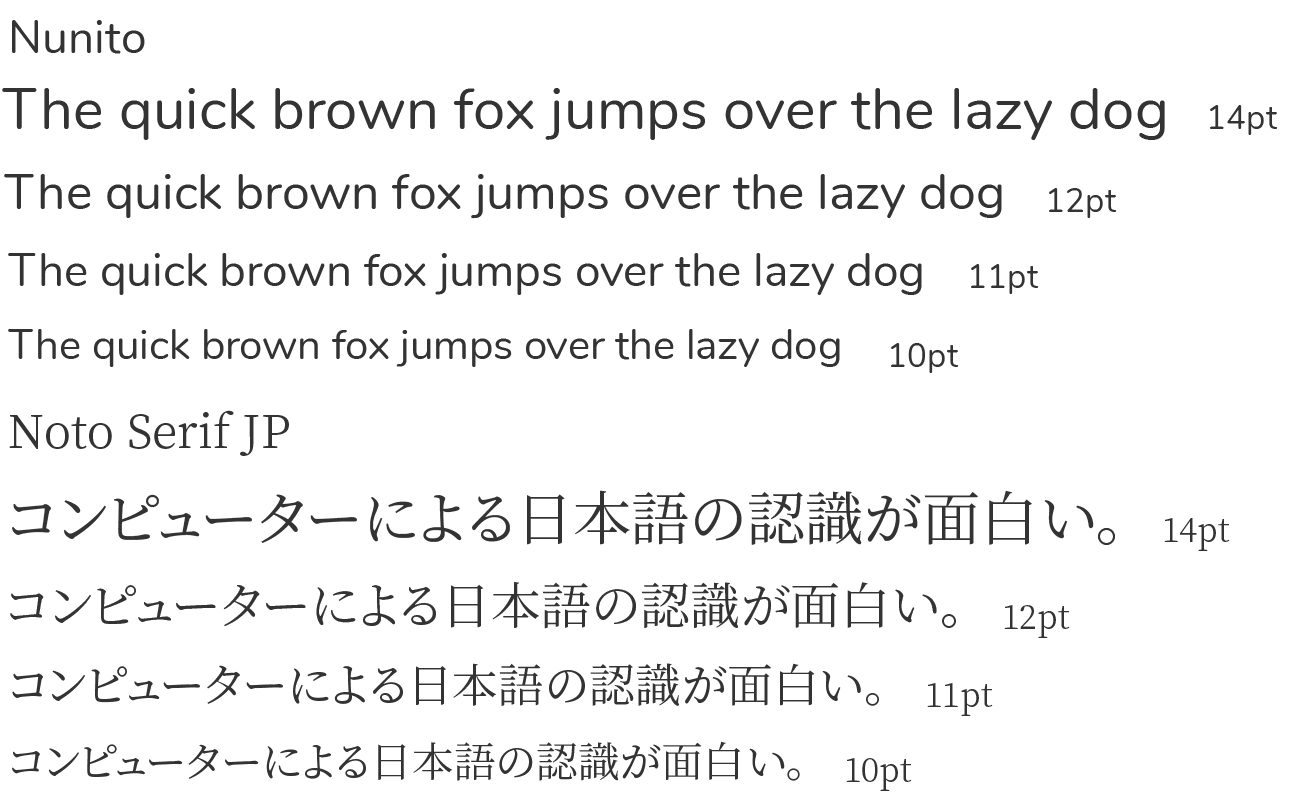
<style>
.page{position:relative;width:1300px;height:800px;background:#ffffff}
.page>*{position:absolute;margin:0}
.t1{font:45.8px "Nunito-Regular";color:#333333}
.t2{font:58.3px "Nunito-Regular";color:#333333}
.t3{font:33.3px "Nunito-Regular";color:#333333}
.t4{font:50px "Nunito-Regular";color:#333333}
.t5{font:41.7px "Nunito-Regular";color:#333333}
.t6{font:45.8px "NotoSerifJP-Regular";color:#333333}
.t7{font:58.3px "NotoSerifJP-Regular";color:#333333}
.t8{font:33.3px "NotoSerifJP-Regular";color:#333333}
.t9{font:50px "NotoSerifJP-Regular";color:#333333}
.t10{font:41.7px "NotoSerifJP-Regular";color:#333333}
</style>
<div class="page">
<p class="t1" style="left:12px;top:20px;width:133px;height:34px">Nunito</p>
<p class="t2" style="left:2px;top:88px;width:1163px;height:52px">The quick brown fox jumps over the lazy dog</p>
<p class="t3" style="left:1210px;top:105px;width:68px;height:30px">14pt</p>
<p class="t4" style="left:4px;top:174px;width:998px;height:45px">The quick brown fox jumps over the lazy dog</p>
<p class="t3" style="left:1049px;top:188px;width:68px;height:30px">12pt</p>
<p class="t1" style="left:8px;top:253px;width:914px;height:42px">The quick brown fox jumps over the lazy dog</p>
<p class="t3" style="left:971px;top:264px;width:68px;height:30px">11pt</p>
<p class="t5" style="left:8px;top:329px;width:832px;height:38px">The quick brown fox jumps over the lazy dog</p>
<p class="t3" style="left:891px;top:343px;width:68px;height:30px">10pt</p>
<p class="t6" style="left:9px;top:410px;width:280px;height:46px">Noto Serif JP</p>
<p class="t7" style="left:12px;top:490px;width:1103px;height:55px">コンピューターによる日本語の認識が面白い。</p>
<p class="t8" style="left:1164px;top:518px;width:66px;height:33px">14pt</p>
<p class="t9" style="left:10px;top:582px;width:946px;height:47px">コンピューターによる日本語の認識が面白い。</p>
<p class="t8" style="left:1004px;top:605px;width:66px;height:33px">12pt</p>
<p class="t6" style="left:12px;top:663px;width:867px;height:43px">コンピューターによる日本語の認識が面白い。</p>
<p class="t8" style="left:927px;top:683px;width:66px;height:33px">11pt</p>
<p class="t10" style="left:12px;top:741px;width:788px;height:40px">コンピューターによる日本語の認識が面白い。</p>
<p class="t8" style="left:846px;top:758px;width:66px;height:33px">10pt</p>
</div>
